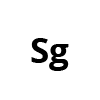
<style>
.page{position:relative;width:100px;height:100px;background:#ffffff}
.page>*{position:absolute;margin:0}
.t1{font:35px "OpenSans-Bold";color:#000000}
</style>
<div class="page">
<p class="t1" style="left:31px;top:38px;width:38px;height:33px">Sg</p>
</div>
